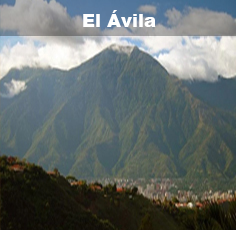
<style>
.page{position:relative;width:236px;height:230px}
.page>*{position:absolute;margin:0}
.t1{font:18px "Arial-Black";color:#ffffff}
</style>
<div class="page">
<p class="t1" style="left:83px;top:10px;width:73px;height:17px">El Ávila</p>
</div>
